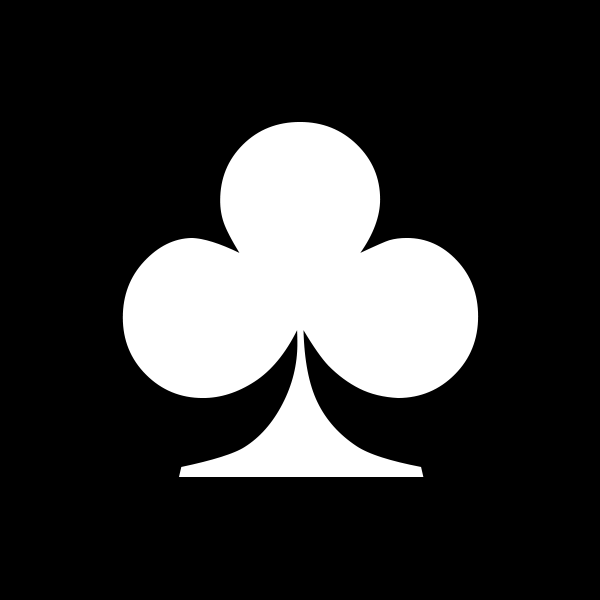
<style>
.page{position:relative;width:600px;height:600px;background:#000000}
.page>*{position:absolute;margin:0}
.t1{font:589.6px "Impact";color:#ffffff}
</style>
<div class="page">
<p class="t1" style="left:122px;top:122px;width:357px;height:355px">♣</p>
</div>
